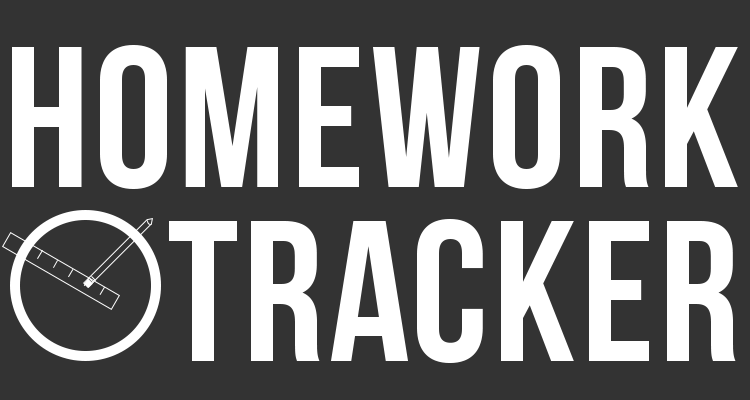
<style>
.page{position:relative;width:750px;height:400px;background:#333333}
.page>*{position:absolute;margin:0}
.t1{font:200px/50.4px "BebasNeue";letter-spacing:0.025em;color:#ffffff}
.t2{font:200px/168.7px "BebasNeue";letter-spacing:0.025em;color:#ffffff}
</style>
<div class="page">
<p class="t1" style="left:12px;top:45px;width:726px;height:318px;text-align:right">Homework<br><span class="t2">Tracker</span></p>
</div>
